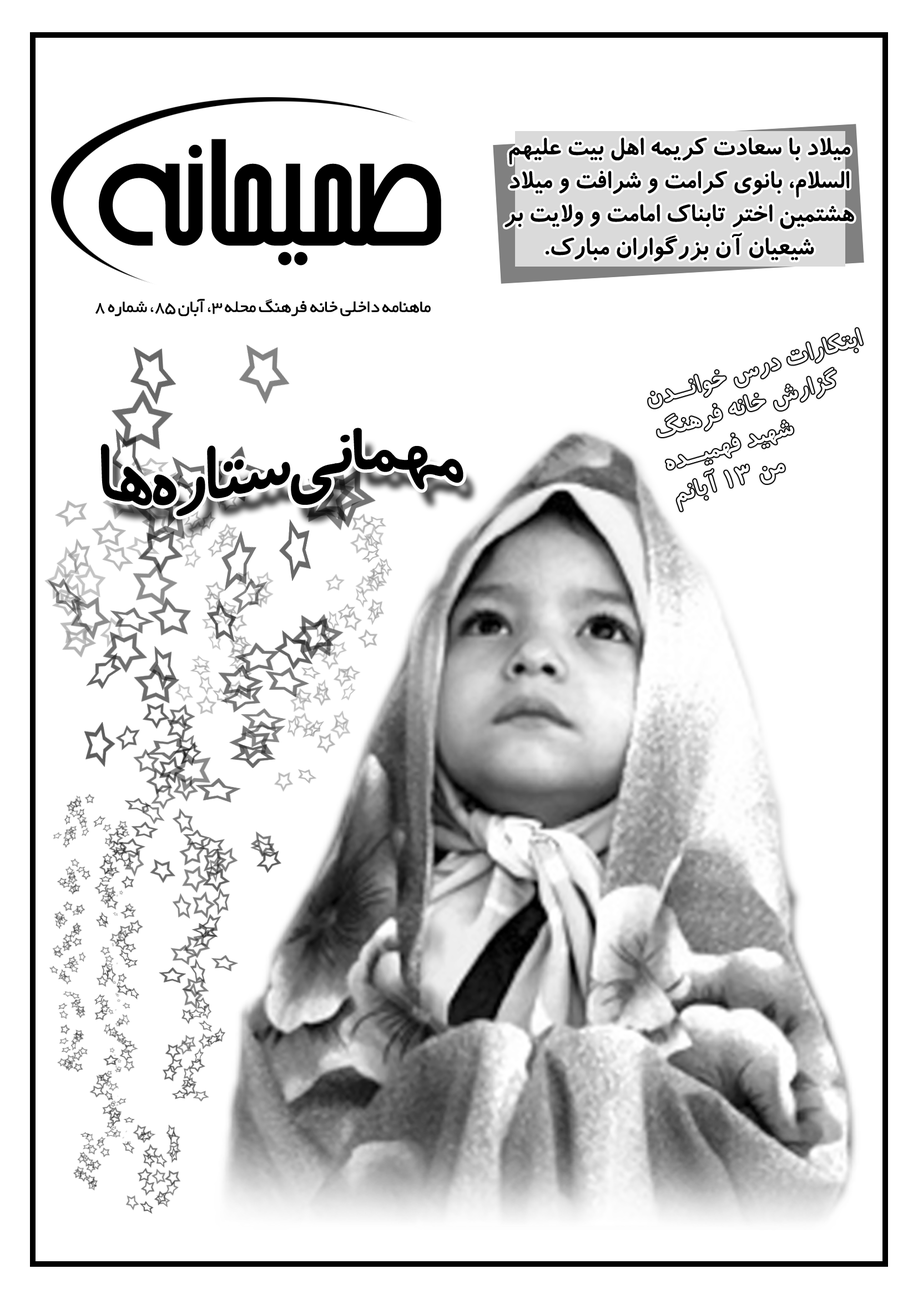
<style>
.page{position:relative;width:918px;height:1299px;background:#ffffff}
.page>*{position:absolute;margin:0}
.t1{font:27.8px "BKoodakBold";color:#000000}
.t2{font:189.9px "BArshia";color:#000000}
.t3{font:18.5px "BYekan";letter-spacing:-0.025em;color:#000000}
.t4{font:81px "BKoodakBold";letter-spacing:-0.05em;color:#000000}
</style>
<div class="page">
<p class="t1" style="left:505px;top:137px;width:349px;height:124px;text-align:center">ميلاد با سعادت كريمه اهل بيت عليهم السلام، بانوي كرامت و شرافت و ميلاد هشتمين اختر تابناك امامت و ولايت بر شيعيان آن بزرگواران مبارك.</p>
<p class="t2" style="left:99px;top:139px;width:342px;height:126px">صميمانه</p>
<p class="t3" style="left:95px;top:299px;width:336px;height:17px">ماهنامه داخلي خانه فرهنگ محله 3، آبان 85، شماره 8</p>
<p class="t4" style="left:100px;top:427px;width:364px;height:89px">مهماني ستاره ها</p>
</div>
